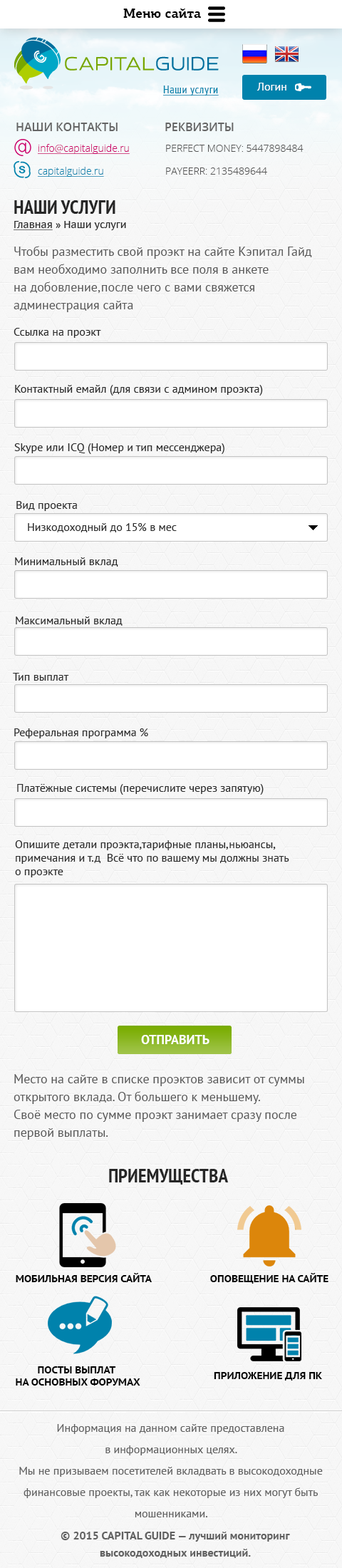
<style>
.page{position:relative;width:342px;height:1568px;background:#f7f7f7}
.page>*{position:absolute;margin:0}
.t1{font:12.8px "PFCentroSlabPro-Bold";color:#000000}
.t2{font:11.4px "PTSans-Narrow";letter-spacing:0.04em;color:#0082ac;text-decoration:underline}
.t3{font:11.4px "PTSans-Regular";color:#ffffff}
.t4{font:11.4px "OpenSans-Semibold";color:#656565;text-transform:uppercase}
.t5{font:10px "OpenSans-Light";color:#cb0069;text-decoration:underline}
.t6{font:10px "OpenSans-Light";color:#545454}
.t7{font:10px "OpenSans-Light";color:#0082ac;text-decoration:underline}
.t8{font:19.2px "PTSans-NarrowBold";color:#262626;text-transform:uppercase}
.t9{font:10px "PTSans-Caption";color:#262626}
.t10{font:10px "PTSans-Caption";color:#262626;text-decoration:underline}
.t11{font:12.8px/17.8px "PTSans-Regular";color:#575757}
.t12{font:11.4px "PTSans-Regular";color:#2a2a2a}
.t13{font:12.8px "PTSans-Bold";color:#ffffff}
.t14{font:10px "PTSans-CaptionBold";color:#000000;text-transform:uppercase}
.t15{font:11.4px/21.4px "PTSans-Regular";color:#616161}
.t16{font:11.4px/17.1px "PTSans-Bold";color:#616161}
</style>
<div class="page">
<p class="t1" style="left:123px;top:8px;width:78px;height:10px">Меню сайта</p>
<p class="t2" style="left:163px;top:86px;width:56px;height:10px">Наши услуги</p>
<p class="t3" style="left:257px;top:83px;width:30px;height:8px">Логин</p>
<p class="t4" style="left:16px;top:123px;width:102px;height:8px">Наши контакты</p>
<p class="t4" style="left:165px;top:123px;width:69px;height:8px">Реквизиты</p>
<p class="t5" style="left:38px;top:144px;width:92px;height:10px">info@capitalguide.ru</p>
<p class="t6" style="left:166px;top:145px;width:138px;height:7px">PERFECT MONEY: 5447898484</p>
<p class="t7" style="left:38px;top:167px;width:66px;height:10px">capitalguide.ru</p>
<p class="t6" style="left:166px;top:167px;width:101px;height:8px">PAYEERR: 2135489644</p>
<p class="t8" style="left:14px;top:200px;width:101px;height:14px">Наши услуги</p>
<p class="t9" style="left:14px;top:221px;width:112px;height:9px"><span class="t10">Главная</span> » Наши услуги</p>
<p class="t11" style="left:14px;top:246px;width:298px;height:66px">Чтобы разместить свой проэкт на сайте Кэпитал Гайд <br>вам необходимо заполнить все поля в анкете <br>на добовление,после чего с вами свяжется <br>админестрация сайта</p>
<p class="t12" style="left:14px;top:328px;width:87px;height:10px">Ссылка на проэкт</p>
<p class="t12" style="left:15px;top:385px;width:248px;height:11px">Контактный емайл (для связи с админом проэкта)</p>
<p class="t12" style="left:14px;top:443px;width:211px;height:11px">Skype или ICQ (Номер и тип мессенджера)</p>
<p class="t12" style="left:16px;top:501px;width:61px;height:10px">Вид проекта</p>
<p class="t12" style="left:28px;top:523px;width:149px;height:9px">Низкодоходный до 15% в мес</p>
<p class="t12" style="left:15px;top:557px;width:103px;height:10px">Минимальный вклад</p>
<p class="t12" style="left:16px;top:617px;width:107px;height:9px">Максимальный вклад</p>
<p class="t12" style="left:13px;top:673px;width:56px;height:8px">Тип выплат</p>
<p class="t12" style="left:14px;top:728px;width:134px;height:10px">Реферальная программа %</p>
<p class="t12" style="left:17px;top:784px;width:247px;height:11px">Платёжные системы (перечислите через запятую)</p>
<p class="t12" style="left:15px;top:840px;width:274px;height:37px">Опишите детали проэкта,тарифные планы,ньюансы,<br>примечания и т.д  Всё что по вашему мы должны знать <br>о проэкте</p>
<p class="t13" style="left:141px;top:1035px;width:69px;height:9px">ОТПРАВИТЬ</p>
<p class="t13" style="left:141px;top:1035px;width:69px;height:9px">ОТПРАВИТЬ</p>
<p class="t11" style="left:14px;top:1074px;width:290px;height:66px">Место на сайте в списке проэктов зависит от суммы <br>открытого вклада. От большего к меньшему. <br>Своё место по сумме проэкт занимает сразу после <br>первой выплаты.</p>
<p class="t8" style="left:109px;top:1169px;width:120px;height:16px">приемущества</p>
<p class="t14" style="left:16px;top:1273px;width:136px;height:9px">Мобильная версия сайта</p>
<p class="t14" style="left:210px;top:1273px;width:119px;height:11px">Оповещение на сайте</p>
<p class="t14" style="left:16px;top:1366px;width:124px;height:20px;text-align:center">Посты выплат <br>на основных форумах</p>
<p class="t14" style="left:214px;top:1372px;width:108px;height:9px">Приложение для ПК</p>
<p class="t15" style="left:19px;top:1424px;width:304px;height:93px;text-align:center">Информация на данном сайте предоставлена <br>в информационных целях.<br>Мы не призываем посетителей вкладвать в высокодоходные финансовые проекты, так как некоторые из них могут быть мошенниками.<br>CapitalGuide не несёт ответственности за действия администрации проектов, представленных на этом сайте.</p>
<p class="t16" style="left:61px;top:1532px;width:229px;height:26px;text-align:center">© 2015 CAPITAL GUIDE — лучший мониторинг <br>высокодоходных инвестиций.</p>
</div>
